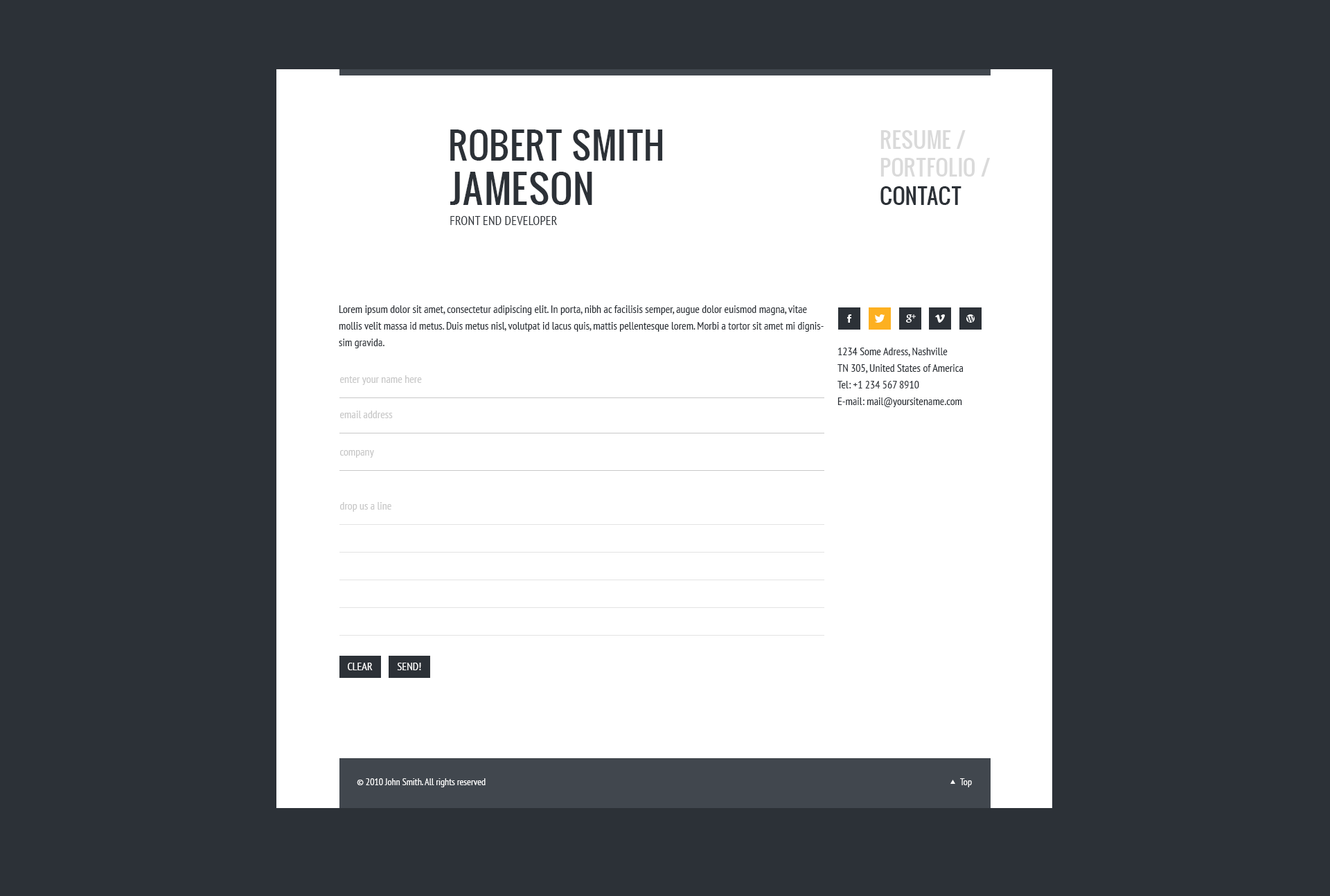
<style>
.page{position:relative;width:1330px;height:896px;background:#2c3137}
.page>*{position:absolute;margin:0}
.t1{font:35.4px "Oswald";color:#2c3137;text-transform:uppercase}
.t2{font:21.2px/28.2px "Oswald";color:#dadada}
.t3{font:21.2px/28.2px "Oswald";color:#2c3137}
.t4{font:38.3px "Oswald";color:#2c3137;text-transform:uppercase}
.t5{font:38.3px "Oswald";color:#222222;text-transform:uppercase}
.t6{font:12.8px "PTSans-Narrow";color:#2c3137}
.t7{font:11.1px/16.6px "PTSans-Narrow";color:#2c3137}
.t8{font:11.1px "PTSans-Narrow";color:#c8c8c8}
.t9{font:11.1px "PTSans-Narrow";color:#ffffff}
.t10{font:9.7px "PTSans-Narrow";color:#ffffff}
</style>
<div class="page">
<p class="t1" style="left:450px;top:130px;width:213px;height:31px">ROBERT Smith</p>
<p class="t2" style="left:881px;top:130px;width:109px;height:75px">RESUME /  <br>PORTFOLIO /<span class="t3"> <br>CONTACT</span></p>
<p class="t4" style="left:450px;top:172px;width:142px;height:33px"><span class="t5"><br></span>jAMESON</p>
<p class="t6" style="left:450px;top:216px;width:107px;height:9px">FRONT END DEVELOPER</p>
<p class="t7" style="left:339px;top:306px;width:485px;height:42px">Lorem ipsum dolor sit amet, consectetur adipiscing elit. In porta, nibh ac facilisis semper, augue dolor euismod magna, vitae mollis velit massa id metus. Duis metus nisl, volutpat id lacus quis, mattis pellentesque lorem. Morbi a tortor sit amet mi dignissim gravida.</p>
<p class="t7" style="left:838px;top:348px;width:126px;height:59px">1234 Some Adress, Nashville<br>TN 305, United States of America<br>Tel: +1 234 567 8910<br>E-mail: mail@yoursitename.com</p>
<p class="t8" style="left:340px;top:375px;width:82px;height:10px">enter your name here</p>
<p class="t8" style="left:340px;top:411px;width:53px;height:7px">email address</p>
<p class="t8" style="left:340px;top:450px;width:34px;height:8px">company</p>
<p class="t8" style="left:340px;top:502px;width:51px;height:10px">drop us a line</p>
<p class="t9" style="left:348px;top:663px;width:25px;height:8px">CLEAR</p>
<p class="t9" style="left:397px;top:663px;width:24px;height:8px">SEND!</p>
<p class="t10" style="left:357px;top:779px;width:129px;height:9px">© 2010 John Smith. All rights reserved</p>
<p class="t10" style="left:960px;top:779px;width:12px;height:9px">Top</p>
</div>
